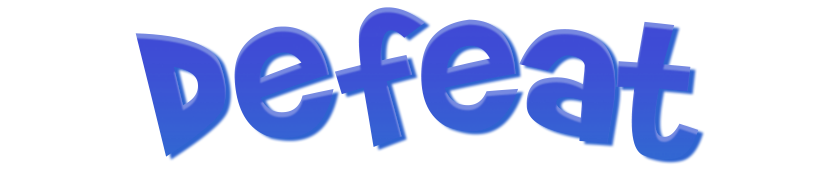
<style>
.page{position:relative;width:822px;height:170px;background:#ffffff}
.page>*{position:absolute;margin:0}
.t1{font:210.2px "BradyBunchRemastered";color:#3d56d4}
.t2{font:210.2px "BradyBunchRemastered";letter-spacing:0.05em;color:#3d56d4}
.t3{font:210.2px "BradyBunchRemastered";letter-spacing:-0.05em;color:#3d56d4}
</style>
<div class="page">
<p class="t1" style="left:135px;top:7px;width:564px;height:153px">d<span class="t2">e</span><span class="t3">f</span>eat</p>
</div>
